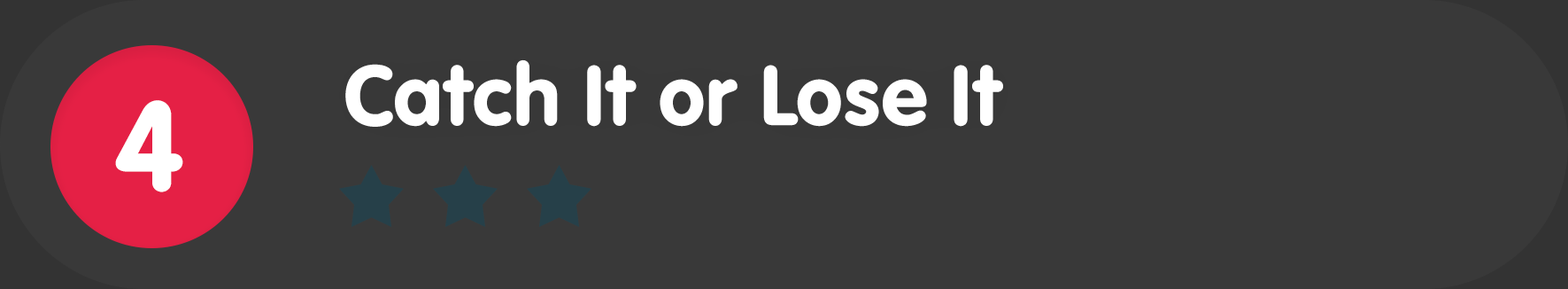
<style>
.page{position:relative;width:1568px;height:289px;background:#393939}
.page>*{position:absolute;margin:0}
.t1{font:88.5px "VAGRundschriftD";color:#ffffff}
.t2{font:132.8px "VAGRundschriftD";color:#ffffff}
</style>
<div class="page">
<p class="t1" style="left:345px;top:59px;width:658px;height:68px">Catch It or Lose It</p>
<p class="t2" style="left:115px;top:100px;width:68px;height:92px">4</p>
</div>
